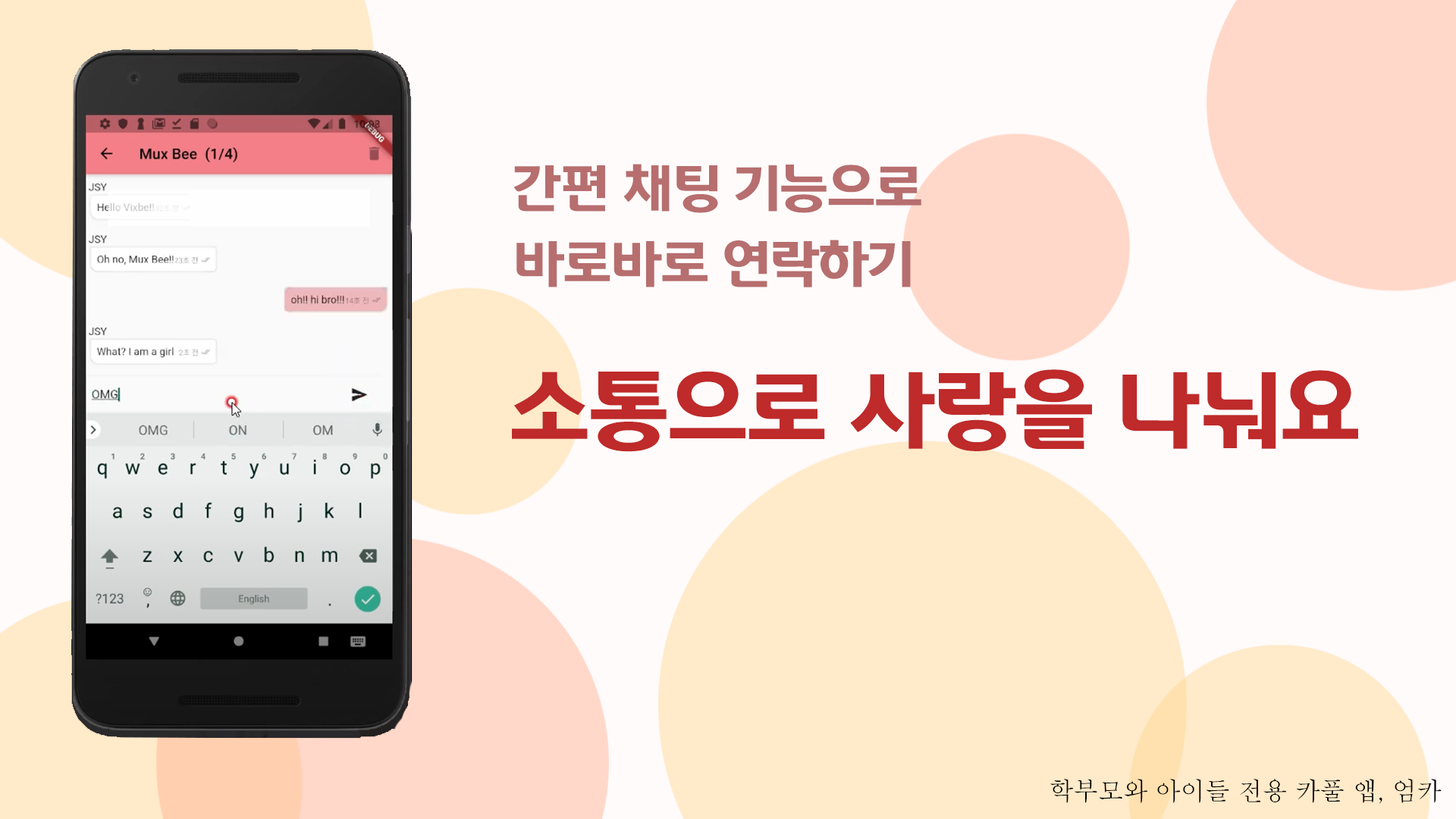
<style>
.page{position:relative;width:1456px;height:819px;background:#fffbfb}
.page>*{position:absolute;margin:0}
.t1{font:51px/75.8px "Nexen_B";letter-spacing:-0.02em;color:#b76e6e}
.t2{font:84.9px "Nexen_B";letter-spacing:-0.02em;color:#bf2a2a}
.t3{font:25.5px "Batang";letter-spacing:-0.02em;color:#000000}
</style>
<div class="page">
<p class="t1" style="left:513px;top:164px;width:408px;height:123px">간편 채팅 기능으로<br>바로바로 연락하기</p>
<p class="t2" style="left:512px;top:369px;width:846px;height:83px">소통으로 사랑을 나눠요</p>
<p class="t3" style="left:1050px;top:779px;width:392px;height:25px">학부모와 아이들 전용 카풀 앱, 엄카</p>
</div>
